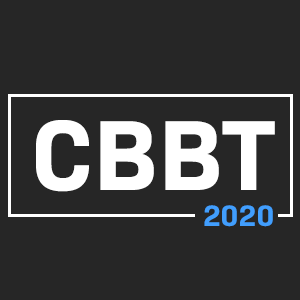
<style>
.page{position:relative;width:300px;height:300px;background:#262626}
.page>*{position:absolute;margin:0}
.t1{font:101px "BioSans-Bold";color:#ffffff}
.t2{font:30px "BioSans-Bold";color:#419efd}
</style>
<div class="page">
<p class="t1" style="left:36px;top:120px;width:239px;height:72px">CBBT</p>
<p class="t2" style="left:204px;top:205px;width:69px;height:22px">2020</p>
</div>
